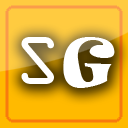
<style>
.page{position:relative;width:128px;height:128px}
.page>*{position:absolute;margin:0}
.t1{font:60px "OCRAStd";color:#ffffff;scale:1.1 1}
.t2{font:60px "Ravie";color:#ffffff;scale:1.1 1}
</style>
<div class="page">
<p class="t1" style="left:21px;top:37px;width:94px;height:51px">S<span class="t2">G</span></p>
</div>
